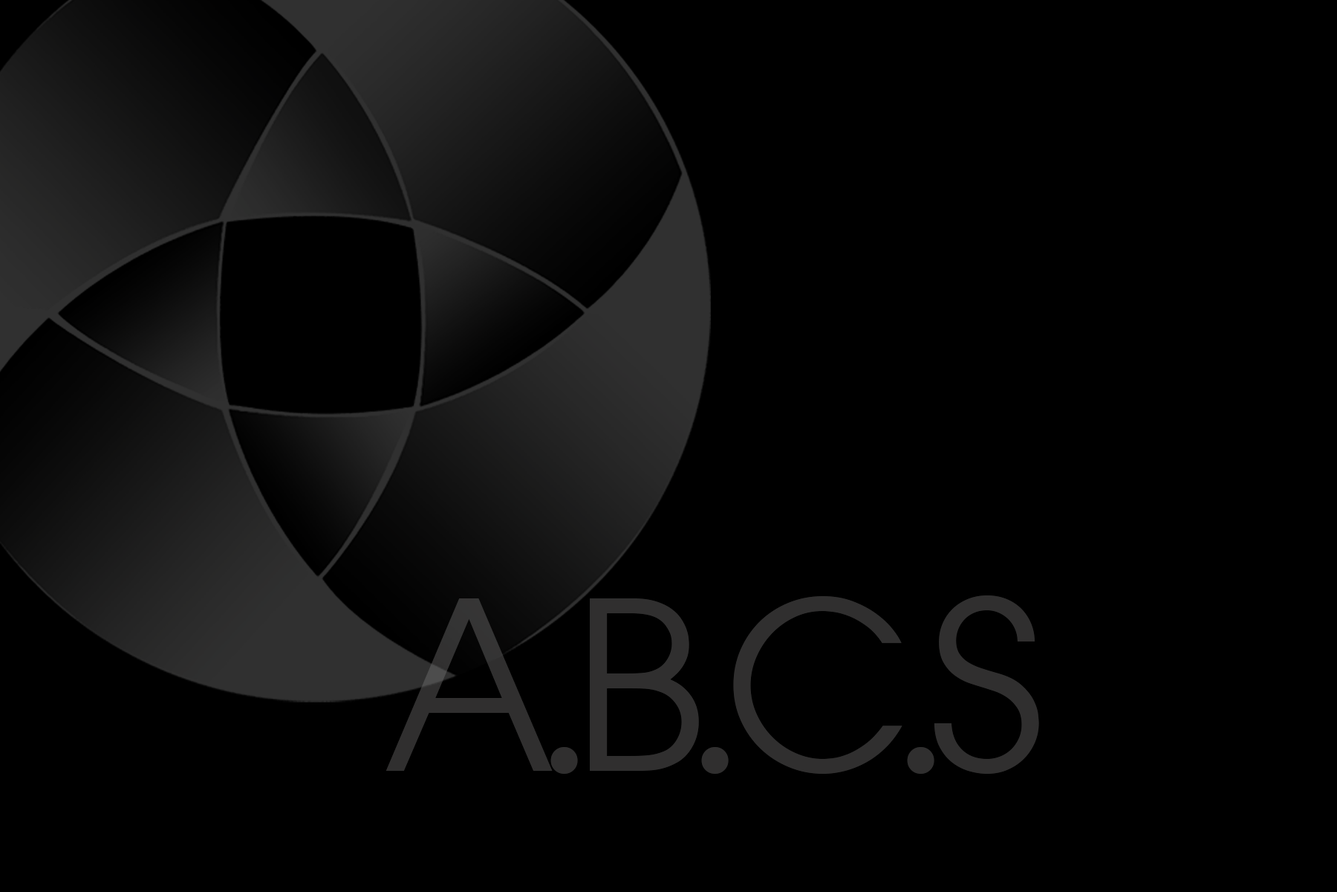
<style>
.page{position:relative;width:1337px;height:892px;background:#000000}
.page>*{position:absolute;margin:0}
.t1{font:232.7px "AvantGardeLT-Book";letter-spacing:-0.1em;color:#302f2f}
.t2{font:232.7px "CGOmega";letter-spacing:-0.1em;color:#302f2f}
</style>
<div class="page">
<p class="t1" style="left:386px;top:595px;width:653px;height:178px">A<span class="t2">.</span>B<span class="t2">.</span>C<span class="t2">.</span>S</p>
</div>
